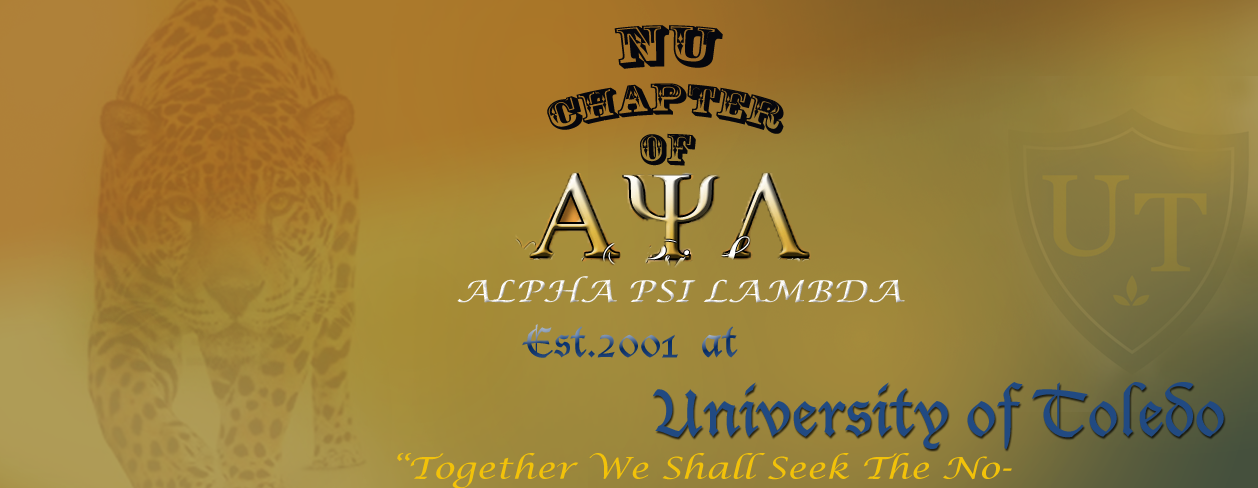
<style>
.page{position:relative;width:1258px;height:488px}
.page>*{position:absolute;margin:0}
.t1{font:42px "RosewoodStd-Regular";color:#06070d}
.t2{font:54px "RosewoodStd-Regular";color:#06070d}
.t3{font:30px "LucidaCalligraphy-Italic";color:#f5f3ed;scale:1.2 1}
.t4{font:40px "LucidaBlackletter"}
.t5{font:63px "LucidaBlackletter";color:#214a82}
.t6{font:30px "LucidaCalligraphy-Italic";color:#f2c209;scale:1.2 1}
</style>
<div class="page">
<p class="t1" style="left:547px;top:25px;width:237px;height:141px;text-align:center"><span class="t2">NU<br></span>CHAPTER <br>OF</p>
<p class="t3" style="left:457px;top:276px;width:448px;height:27px">ALPHA PSI LAMBDA</p>
<p class="t4" style="left:522px;top:324px;width:216px;height:34px">Est.2001  at</p>
<p class="t5" style="left:652px;top:382px;width:572px;height:67px">University of Toledo</p>
<p class="t6" style="left:397px;top:453px;width:615px;height:36px">“Together We Shall Seek The Noblest”</p>
</div>
